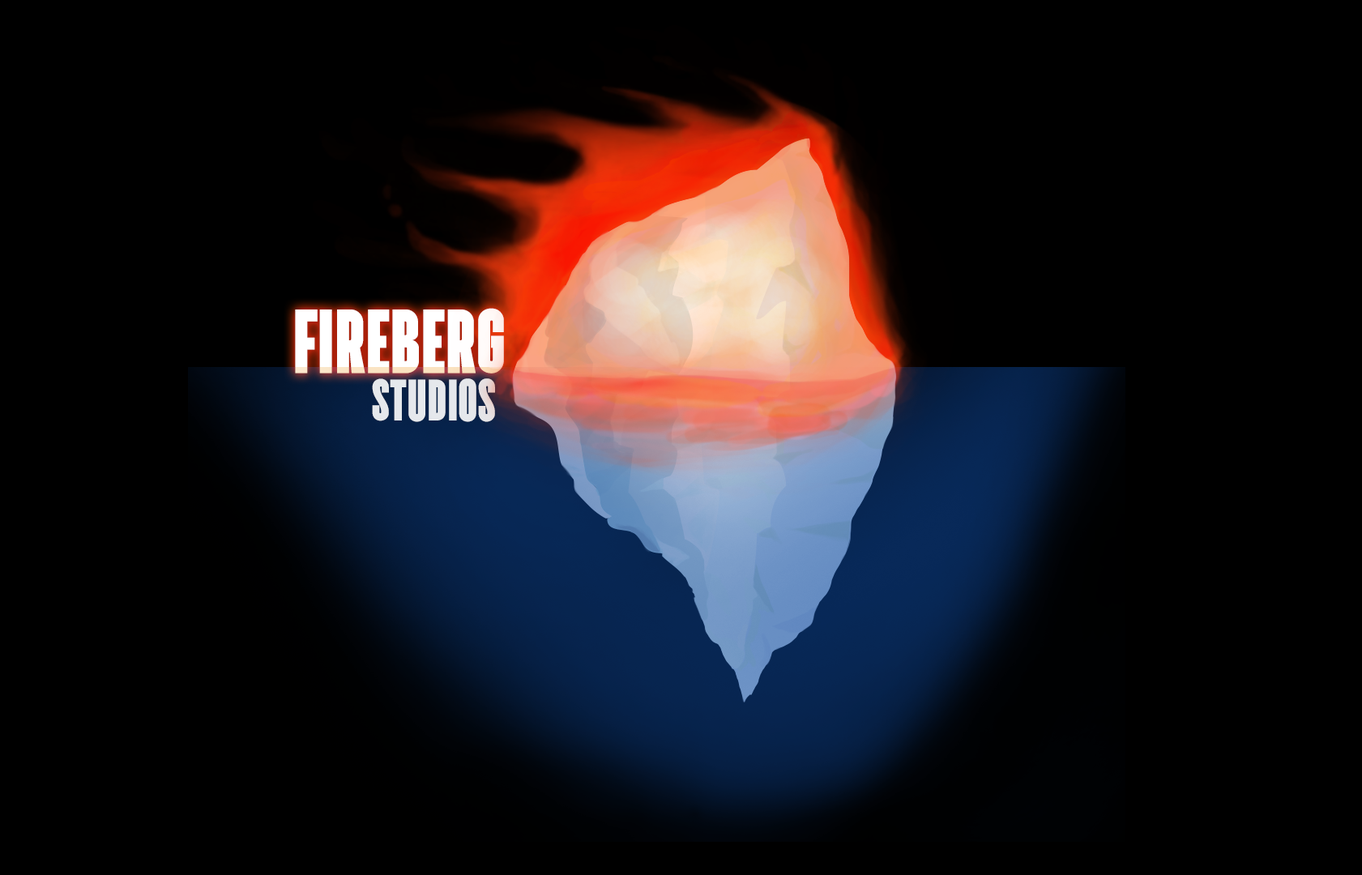
<style>
.page{position:relative;width:1362px;height:875px;background:#000000}
.page>*{position:absolute;margin:0}
.t1{font:90.8px "TTDirectorsDEMOBL-Regular";color:#ffffff}
.t2{font:58.4px "TTDirectorsDEMOBL-Regular";color:#e5e8ec}
</style>
<div class="page">
<p class="t1" style="left:295px;top:308px;width:209px;height:66px">FIREBERG</p>
<p class="t2" style="left:372px;top:378px;width:123px;height:44px">Studios</p>
</div>
